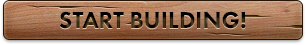
<style>
.page{position:relative;width:306px;height:45px}
.page>*{position:absolute;margin:0}
.t1{font:24px "FuturaPT-Heavy";text-transform:uppercase}
</style>
<div class="page">
<p class="t1" style="left:59px;top:11px;width:187px;height:18px">Start Building!</p>
</div>
